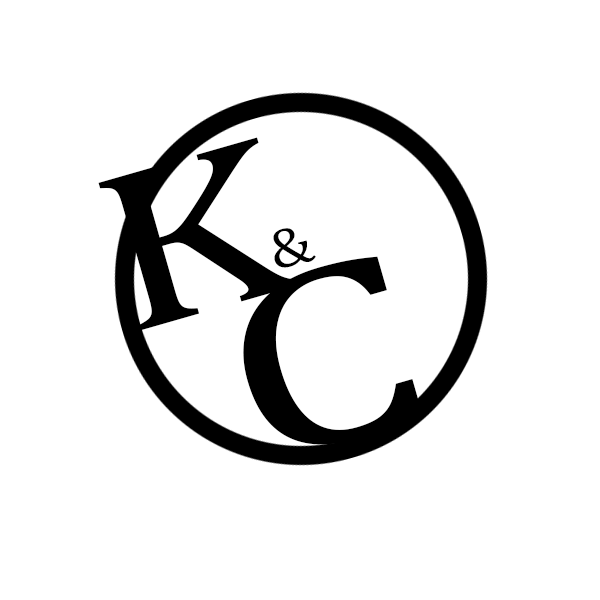
<style>
.page{position:relative;width:600px;height:600px;background:#ffffff}
.page>*{position:absolute;margin:0}
.t1{font:229.9px "Cambria";color:#000000;scale:1.28 1}
.t2{font:56.6px "Cambria";color:#000000;scale:1.11 1}
.t3{font:256.7px "Cambria";color:#000000;scale:1.37 1}
</style>
<div class="page">
<p class="t1" style="left:98px;top:137px;width:205px;height:194px;rotate:-16deg">K</p>
<p class="t2" style="left:273px;top:228px;width:43px;height:40px;rotate:-14deg">&amp;</p>
<p class="t3" style="left:243px;top:256px;width:180px;height:189px;rotate:-16deg">C</p>
</div>
